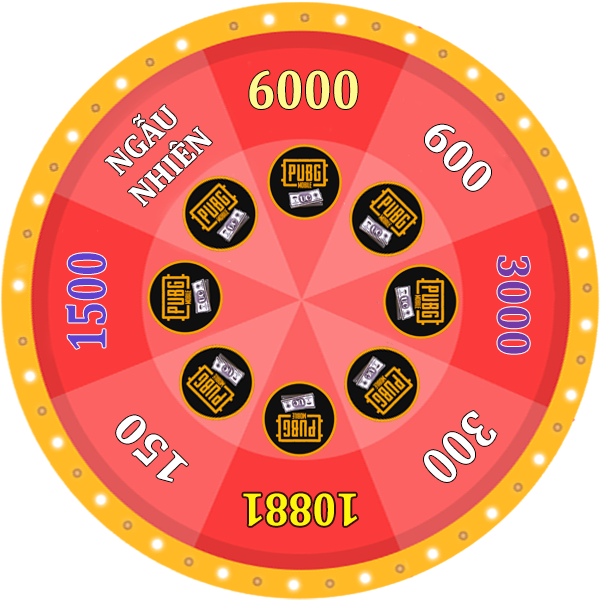
<style>
.page{position:relative;width:600px;height:600px;background:#ffffff}
.page>*{position:absolute;margin:0}
.t1{font:55.6px "Cambria-Bold";color:#fff98f;scale:0.86 1}
.t2{font:32.2px "Cambria-Bold";color:#ffffff}
.t3{font:45.7px "Cambria-Bold";color:#ffffff}
.t4{font:55.6px "Cambria-Bold";color:#6042d0;scale:0.77 1}
.t5{font:46.8px "Cambria-Bold";color:#723ba7;scale:0.92 1}
.t6{font:54.1px "Cambria-Bold";color:#ffffff;scale:0.82 1}
.t7{font:44.7px "Cambria-Bold";color:#ffffff;scale:1.05 1}
.t8{font:46.8px "Cambria-Bold";color:#fff60d;scale:0.86 1}
</style>
<div class="page">
<p class="t1" style="left:249px;top:70px;width:109px;height:39px">6000</p>
<p class="t2" style="left:104px;top:104px;width:108px;height:103px;text-align:center;rotate:-43deg">NGẪU<br>NHIÊN</p>
<p class="t3" style="left:425px;top:124px;width:66px;height:67px;rotate:47deg">600</p>
<p class="t4" style="left:66px;top:253px;width:40px;height:96px;rotate:-90deg">1500</p>
<p class="t5" style="left:497px;top:256px;width:33px;height:98px;rotate:90deg">3000</p>
<p class="t6" style="left:424px;top:411px;width:73px;height:71px;rotate:136deg">300</p>
<p class="t7" style="left:116px;top:415px;width:72px;height:67px;rotate:-136deg">150</p>
<p class="t8" style="left:243px;top:493px;width:114px;height:33px;rotate:180deg">10881</p>
</div>
